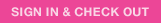
<style>
.page{position:relative;width:161px;height:23px;background:#ec4697}
.page>*{position:absolute;margin:0}
.t1{font:12px "HelveticaNeue-Bold";letter-spacing:0.025em;color:#f9d6e6}
</style>
<div class="page">
<p class="t1" style="left:11px;top:7px;width:138px;height:10px">SIGN IN &amp; CHECK OUT</p>
</div>
